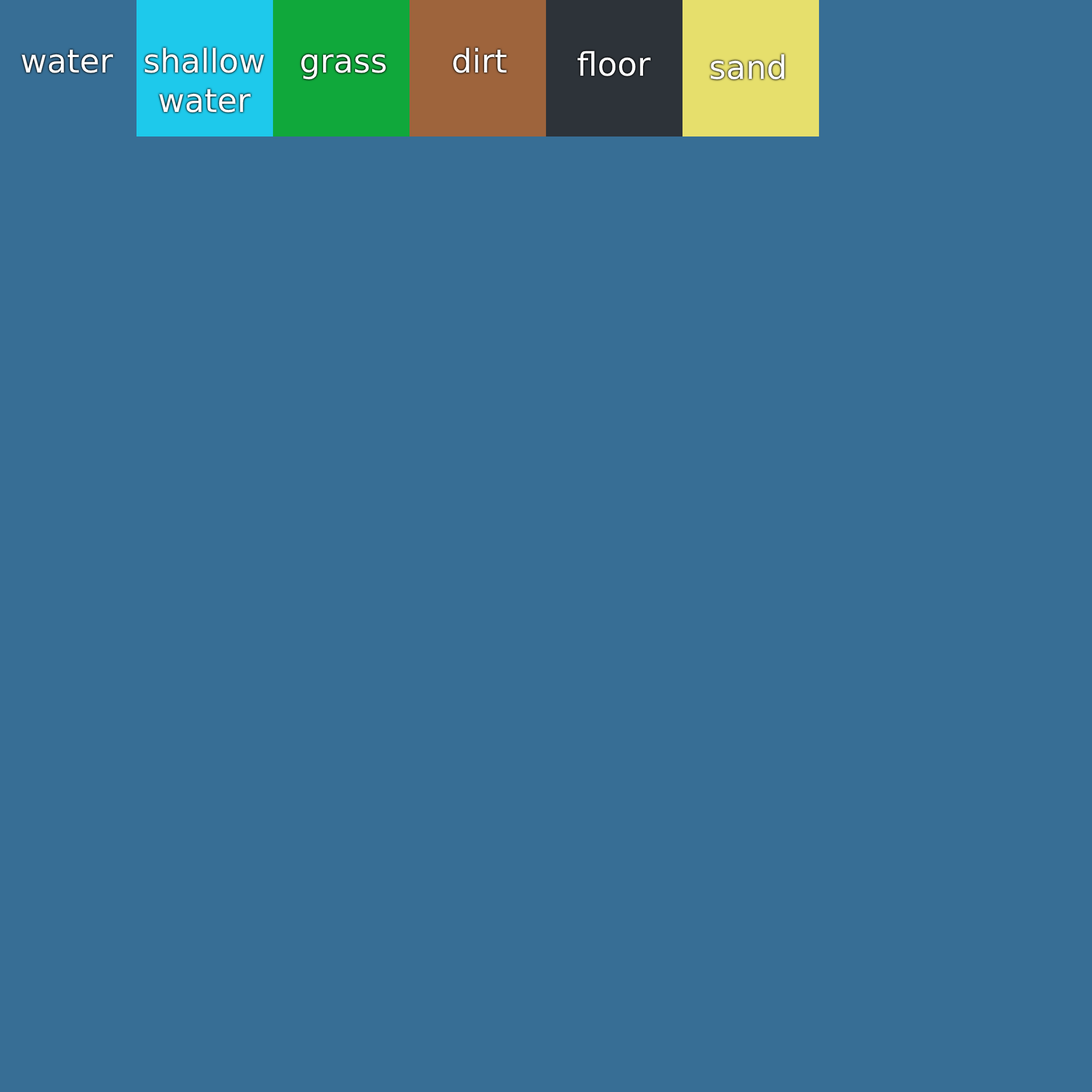
<style>
.page{position:relative;width:1092px;height:1092px;background:#376e95}
.page>*{position:absolute;margin:0}
.t1{font:32.5px "DejaVuSans";color:#ffffff}
</style>
<div class="page">
<p class="t1" style="left:21px;top:50px;width:92px;height:23px">water</p>
<p class="t1" style="left:144px;top:47px;width:120px;height:66px;text-align:center">shallow water</p>
<p class="t1" style="left:301px;top:54px;width:85px;height:25px">grass</p>
<p class="t1" style="left:453px;top:47px;width:54px;height:26px">dirt</p>
<p class="t1" style="left:577px;top:51px;width:74px;height:25px">floor</p>
<p class="t1" style="left:711px;top:54px;width:73px;height:25px">sand</p>
</div>
